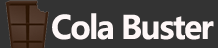
<style>
.page{position:relative;width:218px;height:48px;background:#333333}
.page>*{position:absolute;margin:0}
.t1{font:32px "MicrosoftYaHeiUI-Bold";letter-spacing:-0.05em;color:#fef7f7;scale:0.97 1}
</style>
<div class="page">
<p class="t1" style="left:52px;top:13px;width:162px;height:27px">Cola Buster</p>
</div>
